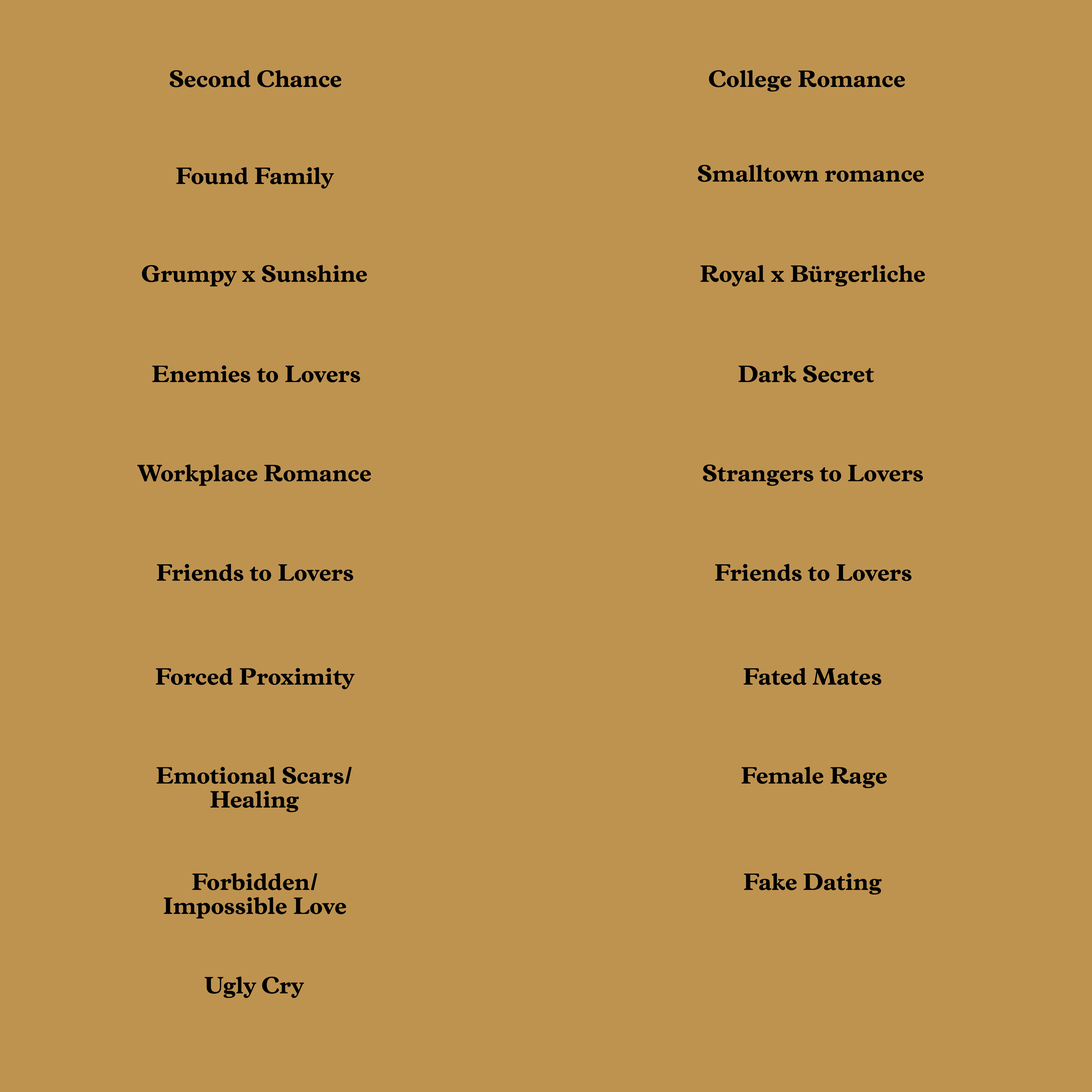
<style>
.page{position:relative;width:1092px;height:1092px;background:#be9350}
.page>*{position:absolute;margin:0}
.t1{font:24px "Vulpa-Bold";color:#000000}
.t2{font:24px/24px "Vulpa-Bold";color:#000000}
</style>
<div class="page">
<p class="t1" style="left:170px;top:70px;width:172px;height:17px">Second Chance</p>
<p class="t1" style="left:709px;top:70px;width:196px;height:22px">College Romance</p>
<p class="t1" style="left:176px;top:167px;width:158px;height:22px">Found Family</p>
<p class="t1" style="left:698px;top:165px;width:226px;height:17px">Smalltown romance</p>
<p class="t1" style="left:142px;top:265px;width:225px;height:22px">Grumpy x Sunshine</p>
<p class="t1" style="left:700px;top:265px;width:225px;height:22px">Royal x Bürgerliche</p>
<p class="t1" style="left:152px;top:365px;width:208px;height:18px">Enemies to Lovers</p>
<p class="t1" style="left:738px;top:365px;width:136px;height:18px">Dark Secret</p>
<p class="t1" style="left:137px;top:464px;width:234px;height:22px">Workplace Romance</p>
<p class="t1" style="left:703px;top:464px;width:220px;height:22px">Strangers to Lovers</p>
<p class="t1" style="left:157px;top:564px;width:196px;height:17px">Friends to Lovers</p>
<p class="t1" style="left:715px;top:564px;width:196px;height:17px">Friends to Lovers</p>
<p class="t1" style="left:156px;top:668px;width:199px;height:21px">Forced Proximity</p>
<p class="t1" style="left:744px;top:668px;width:137px;height:17px">Fated Mates</p>
<p class="t2" style="left:156px;top:767px;width:196px;height:45px;text-align:center">Emotional Scars/<br>Healing</p>
<p class="t1" style="left:741px;top:767px;width:146px;height:21px">Female Rage</p>
<p class="t2" style="left:164px;top:873px;width:182px;height:46px;text-align:center">Forbidden/<br>Impossible Love</p>
<p class="t1" style="left:744px;top:873px;width:138px;height:22px">Fake Dating</p>
<p class="t1" style="left:204px;top:977px;width:100px;height:21px">Ugly Cry</p>
</div>
